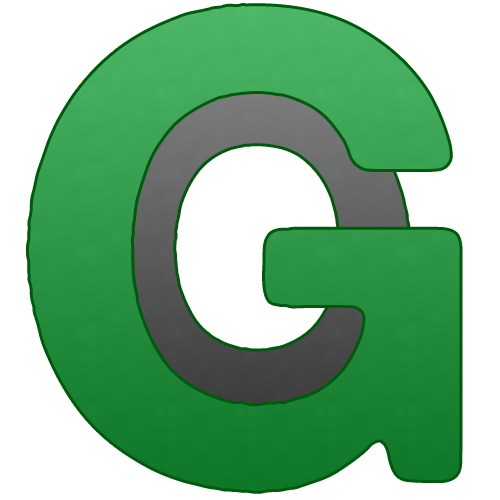
<style>
.page{position:relative;width:500px;height:500px;background:#ffffff}
.page>*{position:absolute;margin:0}
.t1{font:650px "AlteHaasGrotesk_Bold"}
.t2{font:430px "AlteHaasGrotesk_Bold"}
</style>
<div class="page">
<p class="t1" style="left:29px;top:6px;width:431px;height:485px">G</p>
<p class="t2" style="left:106px;top:86px;width:303px;height:322px">O</p>
</div>
